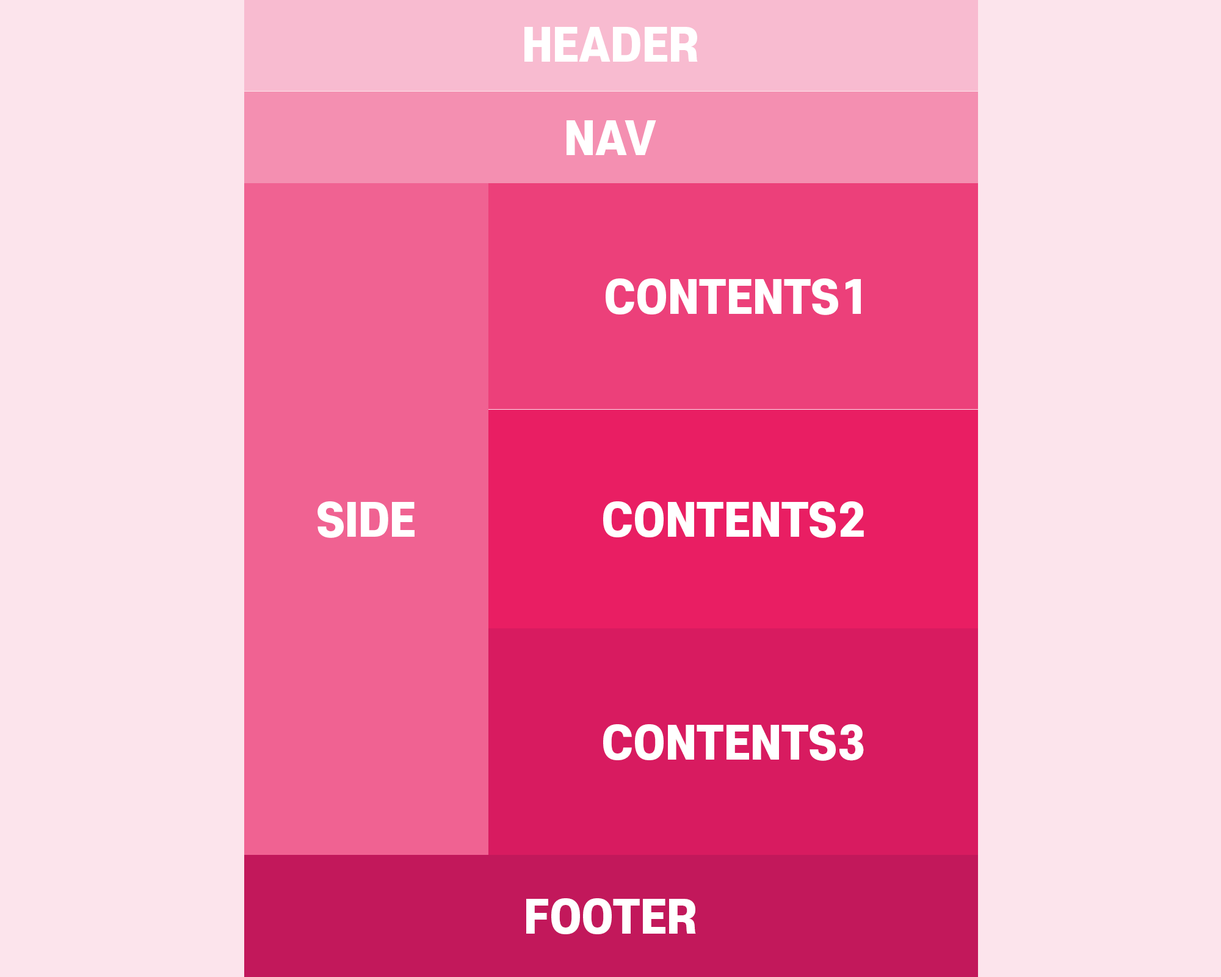
<style>
.page{position:relative;width:1221px;height:977px;background:#fce4ec}
.page>*{position:absolute;margin:0}
.t1{font:44px "S-CoreDream-8Heavy";color:#ffffff}
</style>
<div class="page">
<p class="t1" style="left:524px;top:27px;width:174px;height:35px">HEADER</p>
<p class="t1" style="left:566px;top:120px;width:90px;height:35px">NAV</p>
<p class="t1" style="left:606px;top:278px;width:255px;height:37px">CONTENTS1</p>
<p class="t1" style="left:317px;top:501px;width:97px;height:37px">SIDE</p>
<p class="t1" style="left:603px;top:501px;width:261px;height:37px">CONTENTS2</p>
<p class="t1" style="left:603px;top:724px;width:261px;height:37px">CONTENTS3</p>
<p class="t1" style="left:526px;top:898px;width:170px;height:36px">FOOTER</p>
</div>
